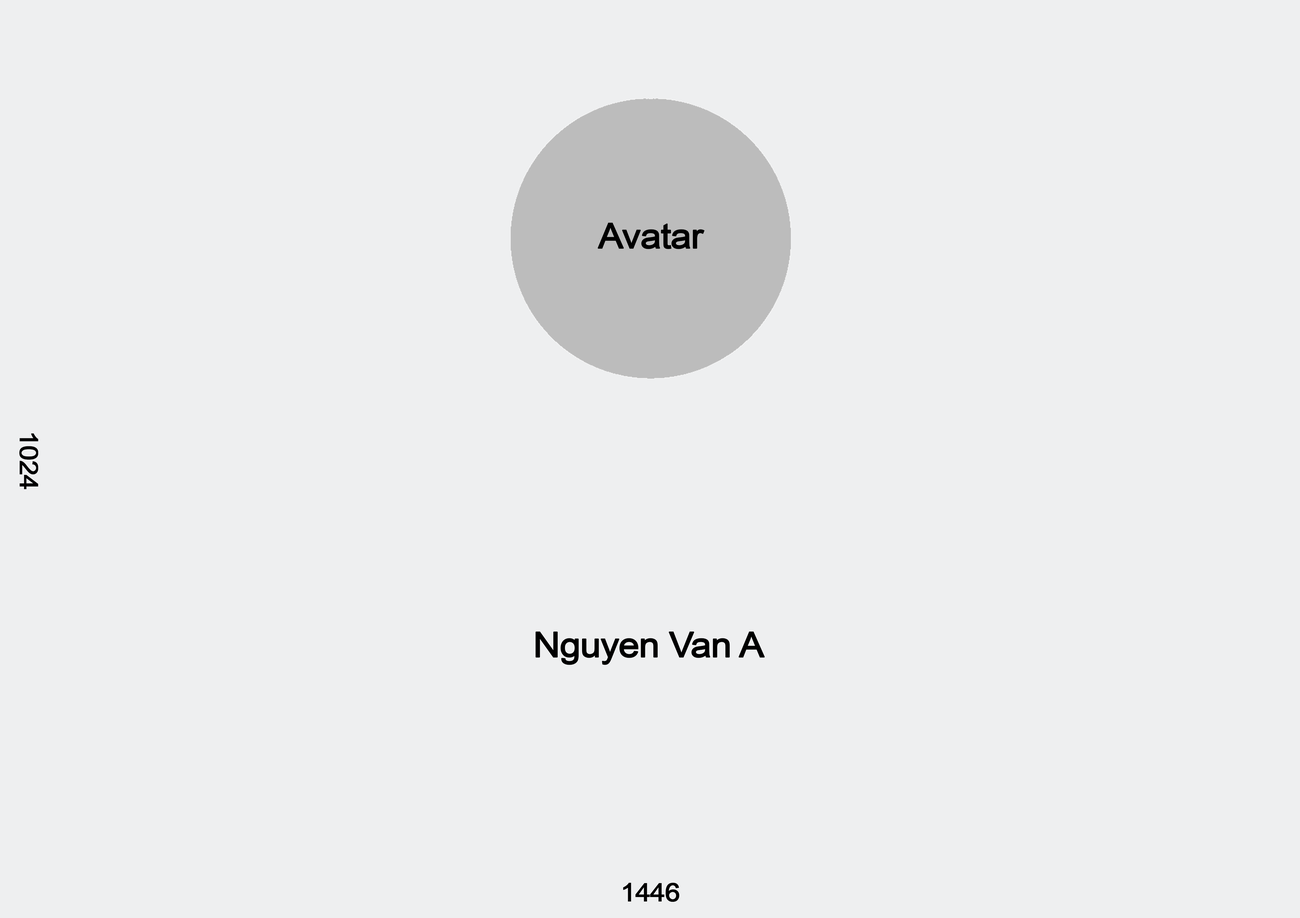
<style>
.page{position:relative;width:1300px;height:918px;background:#eeeff0}
.page>*{position:absolute;margin:0}
.t1{font:34.9px "ArialMT";letter-spacing:-0.04em;color:#000000;font-weight:bold;scale:1.07 1}
.t2{font:25.4px "ArialMT";letter-spacing:-0.04em;color:#000000;font-weight:bold;scale:1.07 1}
</style>
<div class="page">
<p class="t1" style="left:597px;top:222px;width:107px;height:27px">Avatar</p>
<p class="t2" style="left:19px;top:433px;width:19px;height:56px;rotate:90deg">1024</p>
<p class="t1" style="left:535px;top:631px;width:230px;height:34px">Nguyen Van A</p>
<p class="t2" style="left:623px;top:882px;width:56px;height:19px">1446</p>
</div>
